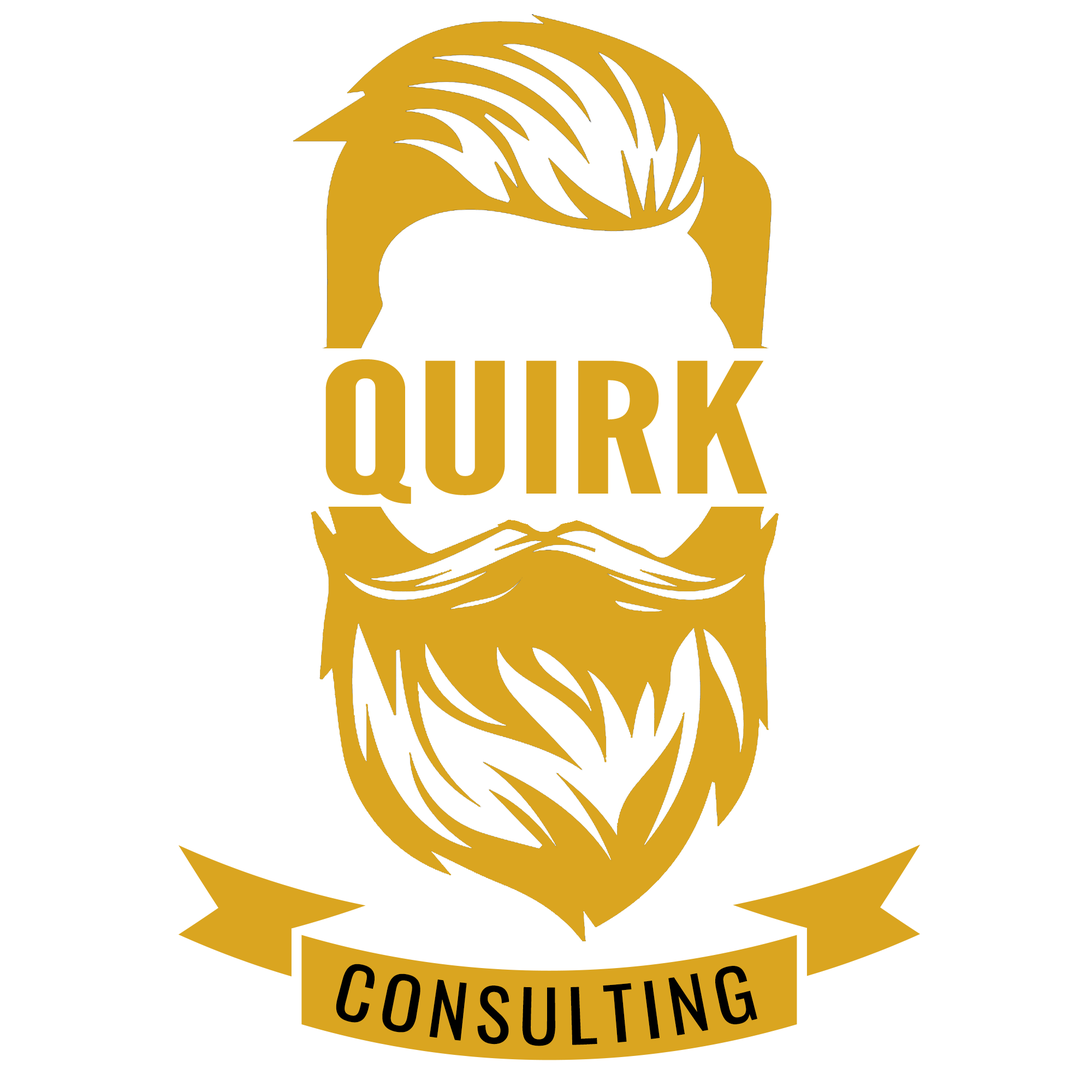
<style>
.page{position:relative;width:1092px;height:1092px;background:#ffffff}
.page>*{position:absolute;margin:0}
.t1{font:180.8px "LeagueGothic-Regular";color:#daa520;text-transform:uppercase;scale:1.52 1}
.t2{font:71px "Oswald-Regular";letter-spacing:0.1em;color:#000000;text-transform:uppercase}
</style>
<div class="page">
<p class="t1" style="left:325px;top:359px;width:442px;height:145px">QUIRK</p>
<p class="t2" style="left:336px;top:964px;width:421px;height:82px">CONSULTING</p>
</div>
